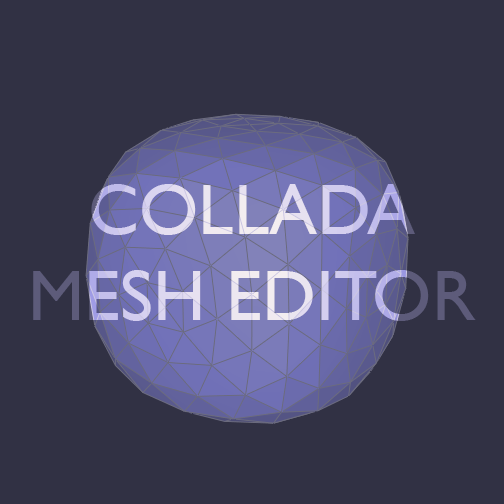
<style>
.page{position:relative;width:504px;height:504px;background:#313144}
.page>*{position:absolute;margin:0}
.t1{font:72px "GillSansMT";text-transform:uppercase}
</style>
<div class="page">
<p class="t1" style="left:33px;top:184px;width:443px;height:137px;text-align:center">Collada<br>Mesh Editor</p>
</div>
